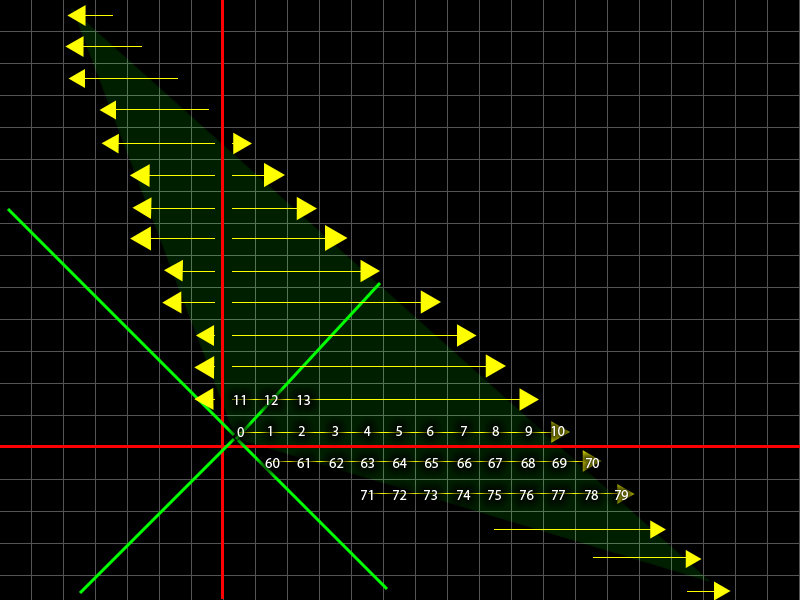
<style>
.page{position:relative;width:800px;height:600px;background:#000000}
.page>*{position:absolute;margin:0}
.t1{font:14px "MyriadPro-Regular";color:#ffffff}
</style>
<div class="page">
<p class="t1" style="left:234px;top:395px;width:11px;height:10px">11</p>
<p class="t1" style="left:265px;top:395px;width:13px;height:10px">12</p>
<p class="t1" style="left:297px;top:395px;width:13px;height:10px">13</p>
<p class="t1" style="left:237px;top:427px;width:7px;height:10px">0</p>
<p class="t1" style="left:268px;top:426px;width:4px;height:10px">1</p>
<p class="t1" style="left:298px;top:426px;width:7px;height:10px">2</p>
<p class="t1" style="left:332px;top:426px;width:6px;height:10px">3</p>
<p class="t1" style="left:364px;top:426px;width:7px;height:10px">4</p>
<p class="t1" style="left:396px;top:426px;width:6px;height:10px">5</p>
<p class="t1" style="left:427px;top:426px;width:7px;height:10px">6</p>
<p class="t1" style="left:461px;top:426px;width:6px;height:10px">7</p>
<p class="t1" style="left:492px;top:426px;width:7px;height:10px">8</p>
<p class="t1" style="left:525px;top:426px;width:7px;height:10px">9</p>
<p class="t1" style="left:551px;top:426px;width:14px;height:10px">10</p>
<p class="t1" style="left:265px;top:458px;width:15px;height:10px">60</p>
<p class="t1" style="left:297px;top:458px;width:12px;height:10px">61</p>
<p class="t1" style="left:329px;top:458px;width:15px;height:10px">62</p>
<p class="t1" style="left:361px;top:458px;width:13px;height:10px">63</p>
<p class="t1" style="left:393px;top:458px;width:14px;height:10px">64</p>
<p class="t1" style="left:425px;top:458px;width:13px;height:10px">65</p>
<p class="t1" style="left:457px;top:458px;width:15px;height:10px">66</p>
<p class="t1" style="left:488px;top:458px;width:14px;height:10px">67</p>
<p class="t1" style="left:521px;top:458px;width:14px;height:10px">68</p>
<p class="t1" style="left:552px;top:458px;width:15px;height:10px">69</p>
<p class="t1" style="left:586px;top:458px;width:13px;height:10px">70</p>
<p class="t1" style="left:361px;top:490px;width:12px;height:10px">71</p>
<p class="t1" style="left:393px;top:490px;width:14px;height:10px">72</p>
<p class="t1" style="left:424px;top:490px;width:13px;height:10px">73</p>
<p class="t1" style="left:457px;top:490px;width:14px;height:10px">74</p>
<p class="t1" style="left:488px;top:490px;width:13px;height:10px">75</p>
<p class="t1" style="left:520px;top:490px;width:14px;height:10px">76</p>
<p class="t1" style="left:552px;top:490px;width:13px;height:10px">77</p>
<p class="t1" style="left:585px;top:490px;width:13px;height:10px">78</p>
<p class="t1" style="left:615px;top:490px;width:13px;height:10px">79</p>
</div>
